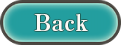
<style>
.page{position:relative;width:121px;height:45px}
.page>*{position:absolute;margin:0}
.t1{font:23px "RyuminPro-ExBold";color:#ffffff}
</style>
<div class="page">
<p class="t1" style="left:34px;top:14px;width:54px;height:17px">Back</p>
</div>
